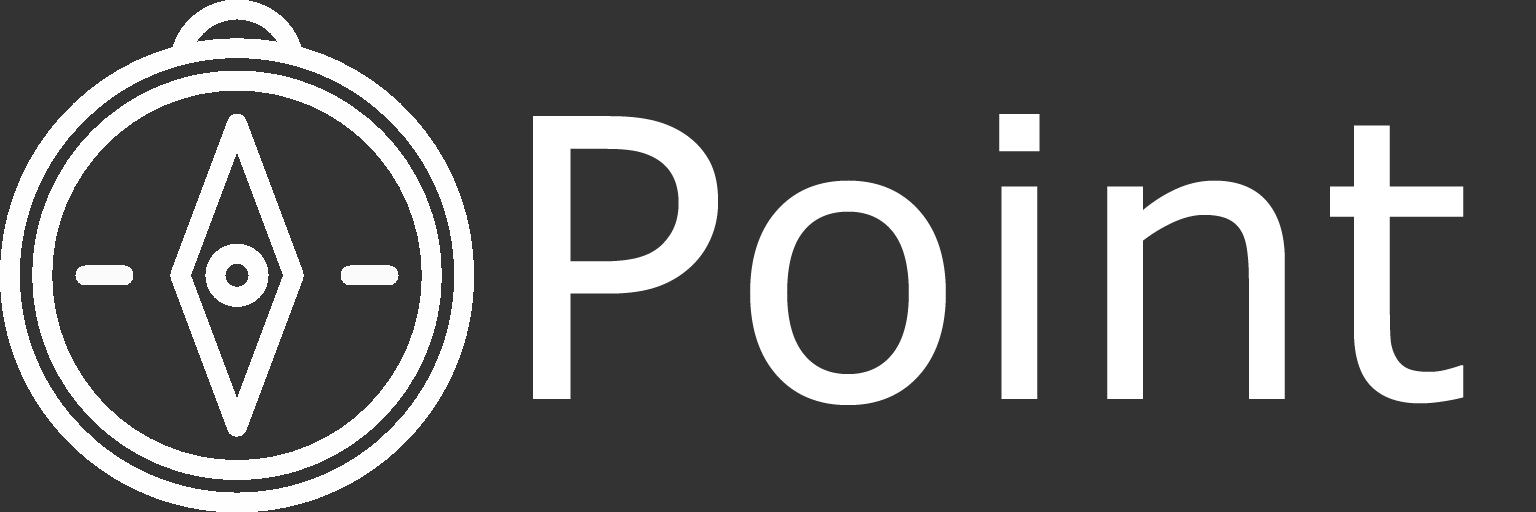
<style>
.page{position:relative;width:1536px;height:512px;background:#333333}
.page>*{position:absolute;margin:0}
.t1{font:388.9px "Verdana";color:#ffffff}
</style>
<div class="page">
<p class="t1" style="left:533px;top:114px;width:931px;height:291px">Point</p>
</div>
